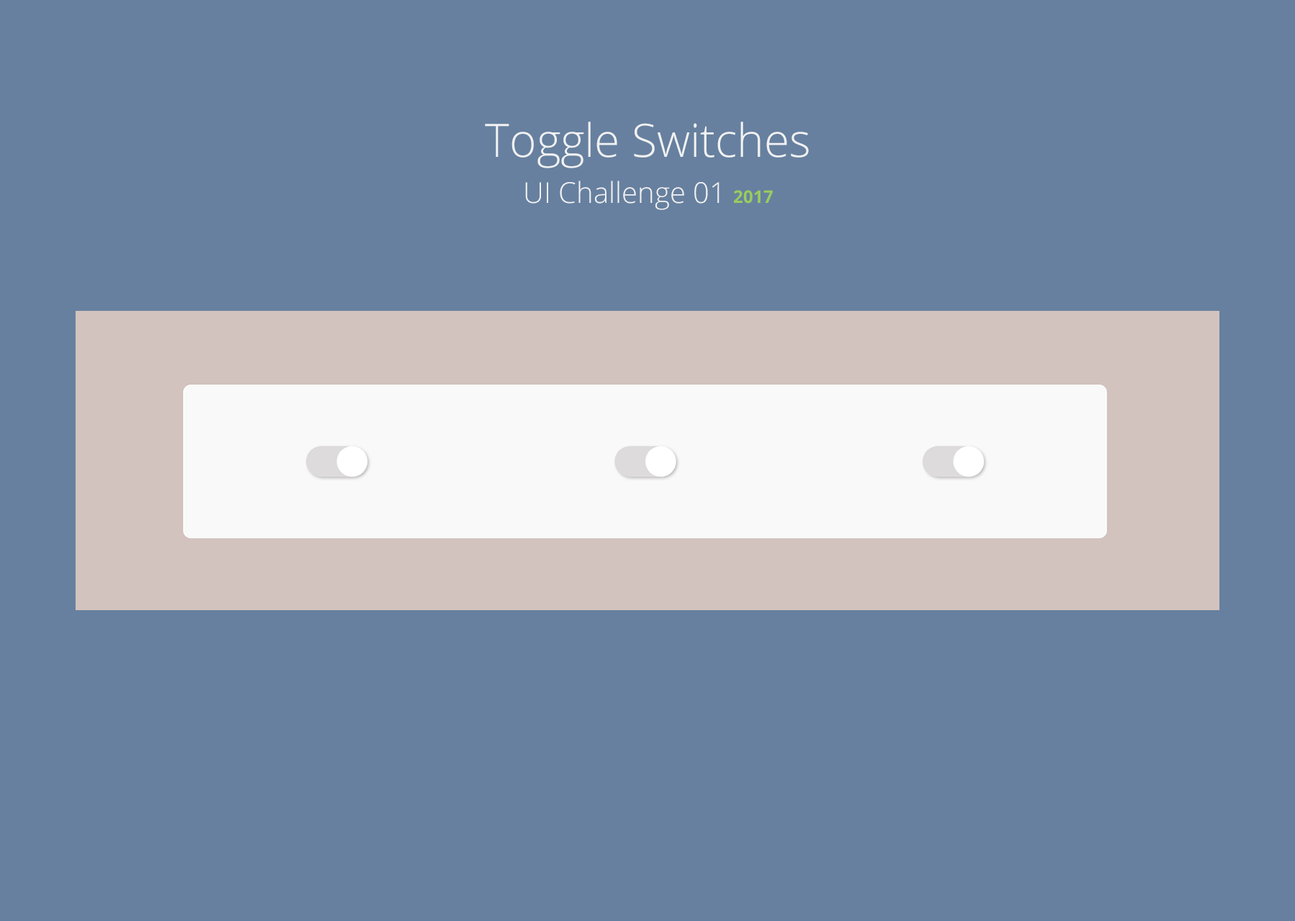
<style>
.page{position:relative;width:1295px;height:921px;background:#67809f}
.page>*{position:absolute;margin:0}
.t1{font:46px/46px "OpenSans-Light";color:#f1f2f4}
.t2{font:28.8px/46px "OpenSans-Light";color:#f1f2f4}
.t3{font:17.3px/46px "OpenSans-Bold";color:#98cc5d}
</style>
<div class="page">
<p class="t1" style="left:485px;top:122px;width:324px;height:88px;text-align:center">Toggle Switches<br><span class="t2">UI Challenge 01 </span><span class="t3">2017</span></p>
</div>
